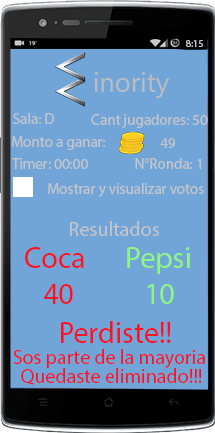
<style>
.page{position:relative;width:215px;height:433px;background:#71a4d7}
.page>*{position:absolute;margin:0}
.t1{font:10px "MyriadPro-Regular";color:#c4c5cb}
.t2{font:15px "MyriadPro-Regular";color:#c4c5cb}
.t3{font:20px "MyriadPro-Regular";color:#c4c5cb}
.t4{font:30px "MyriadPro-Regular";color:#f61525}
.t5{font:30px "MyriadPro-Regular";color:#000000}
.t6{font:30px "MyriadPro-Regular";color:#8ef686}
.t7{font:20px "MyriadPro-Regular";color:#f61525}
</style>
<div class="page">
<p class="t1" style="left:186px;top:40px;width:17px;height:7px">8:15</p>
<p class="t2" style="left:13px;top:113px;width:41px;height:11px">Sala: D</p>
<p class="t2" style="left:91px;top:114px;width:117px;height:14px">Cant jugadores: 50</p>
<p class="t2" style="left:12px;top:136px;width:93px;height:14px">Monto a ganar:</p>
<p class="t2" style="left:160px;top:138px;width:15px;height:10px">49</p>
<p class="t2" style="left:12px;top:158px;width:76px;height:11px">Timer: 00:00</p>
<p class="t2" style="left:135px;top:158px;width:66px;height:11px">N°Ronda: 1</p>
<p class="t2" style="left:48px;top:183px;width:156px;height:14px">Mostrar y visualizar votos</p>
<p class="t3" style="left:70px;top:221px;width:89px;height:15px">Resultados</p>
<p class="t4" style="left:25px;top:247px;width:59px;height:57px"><span class="t5">  </span>Coca<br>     40</p>
<p class="t6" style="left:127px;top:247px;width:63px;height:57px">Pepsi<br>     10</p>
<p class="t4" style="left:61px;top:321px;width:110px;height:22px">Perdiste!!</p>
<p class="t7" style="left:13px;top:349px;width:192px;height:19px">Sos parte de la mayoria</p>
<p class="t7" style="left:21px;top:368px;width:181px;height:17px">Quedaste eliminado!!!</p>
</div>
